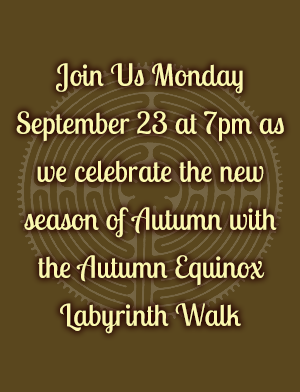
<style>
.page{position:relative;width:300px;height:392px;background:#5a471e}
.page>*{position:absolute;margin:0}
.t1{font:30px/48px "LobsterTwo";letter-spacing:0.01em;color:#fbf8ae}
.t2{font:18px/24px "Verdana";letter-spacing:0.01em;color:#fbf8ae}
</style>
<div class="page">
<p class="t1" style="left:16px;top:63px;width:268px;height:271px;text-align:center"><span class="t2"><br><br></span>Join Us Monday<br>September 23 at 7pm as<br>we celebrate the new<br>season of Autumn with<br>the Autumn Equinox<br>Labyrinth Walk</p>
</div>
